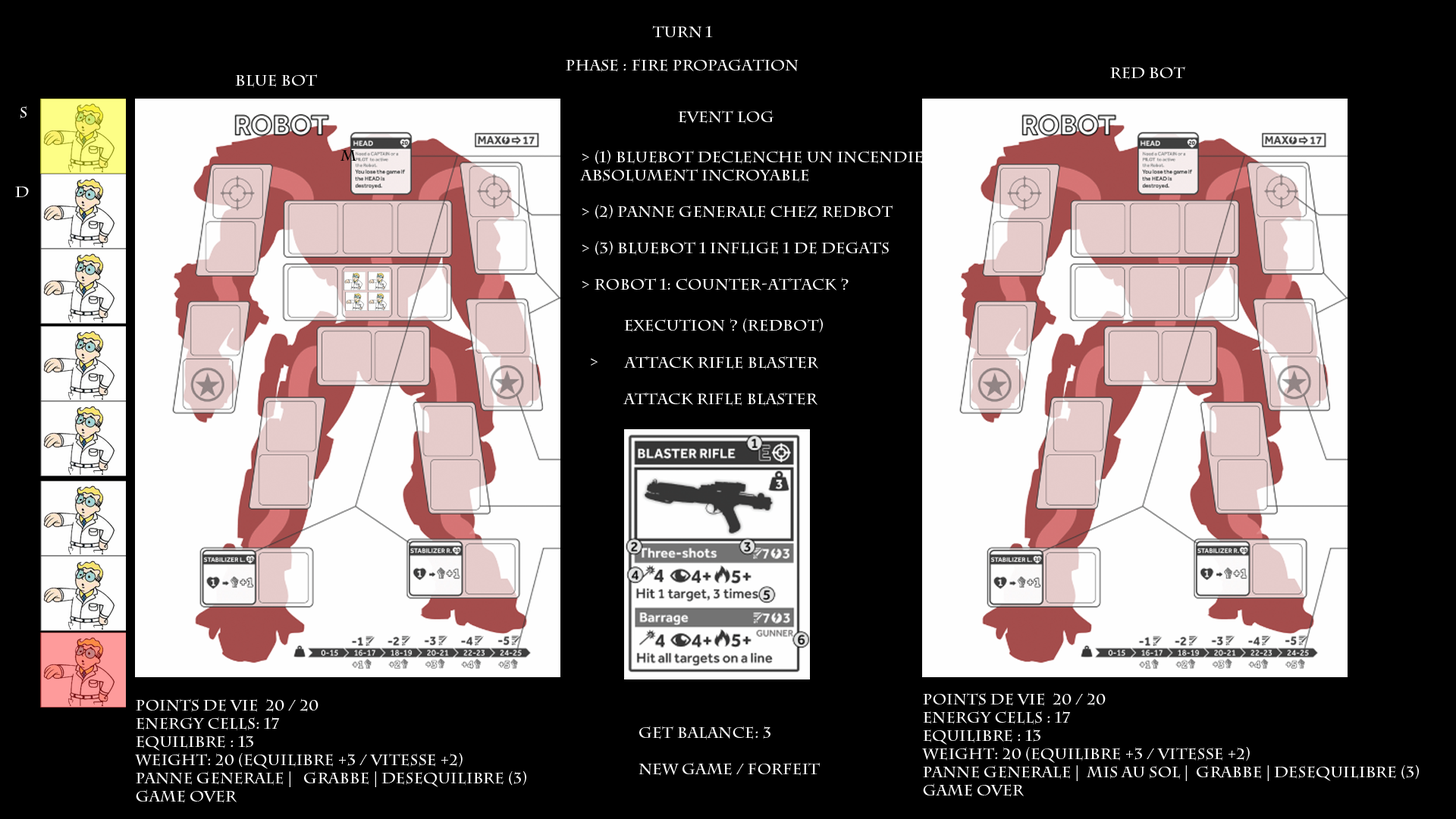
<style>
.page{position:relative;width:1456px;height:819px;background:#000000}
.page>*{position:absolute;margin:0}
.t1{font:15.2px "CharlemagneStd-Bold";color:#ffffff}
.t2{font:15.2px "CharlemagneStd-Bold";color:#000000}
</style>
<div class="page">
<p class="t1" style="left:652px;top:25px;width:61px;height:13px">TURN 1</p>
<p class="t1" style="left:566px;top:58px;width:233px;height:14px">Phase : FIRE PROPAGATION</p>
<p class="t1" style="left:1110px;top:66px;width:75px;height:14px">RED BOT</p>
<p class="t1" style="left:235px;top:74px;width:82px;height:14px">BLUE BOT</p>
<p class="t1" style="left:20px;top:105px;width:7px;height:14px">S</p>
<p class="t1" style="left:678px;top:110px;width:95px;height:14px">Event log</p>
<p class="t2" style="left:340px;top:150px;width:16px;height:11px">m</p>
<p class="t1" style="left:580px;top:150px;width:343px;height:141px">&gt; (1) BLUEBOT declEnche un incendie<br>absolument incroyable<br><br>&gt; (2) PANNE GENERALE CHEZ REDBOT<br><br>&gt; (3) BLUEBOT 1 INFLIGE 1 DE DEGATS<br><br>&gt; ROBOT 1: COUNTER-ATTACK ?</p>
<p class="t1" style="left:15px;top:187px;width:14px;height:10px">D</p>
<p class="t1" style="left:624px;top:318px;width:199px;height:15px">EXECUTION ? (REDBOT)</p>
<p class="t1" style="left:591px;top:358px;width:7px;height:8px">&gt;</p>
<p class="t1" style="left:623px;top:356px;width:195px;height:14px">Attack RIFLE BLASTER</p>
<p class="t1" style="left:623px;top:392px;width:194px;height:14px">Attack RIFLE BLASTER</p>
<p class="t1" style="left:135px;top:698px;width:391px;height:105px">Points de vie  20 / 20<br>ENERGY CELLS: 17<br>Equilibre : 13<br>Weight: 20 (Equilibre +3 / Vitesse +2)<br>PANNE GENERALE |   GRABBE | DESEQUILIBRE (3)<br>GAME OVER</p>
<p class="t1" style="left:922px;top:692px;width:497px;height:105px">Points de vie  20 / 20<br>ENERGY CELLS : 17<br>Equilibre : 13<br>Weight: 20 (Equilibre +3 / Vitesse +2)<br>PANNE GENERALE |  MIS AU SOL |  GRABBE | DESEQUILIBRE (3)<br>GAME OVER</p>
<p class="t1" style="left:639px;top:726px;width:181px;height:50px">GET BALANCE: 3<br><br>NEW GAME / FORFEIT</p>
</div>
